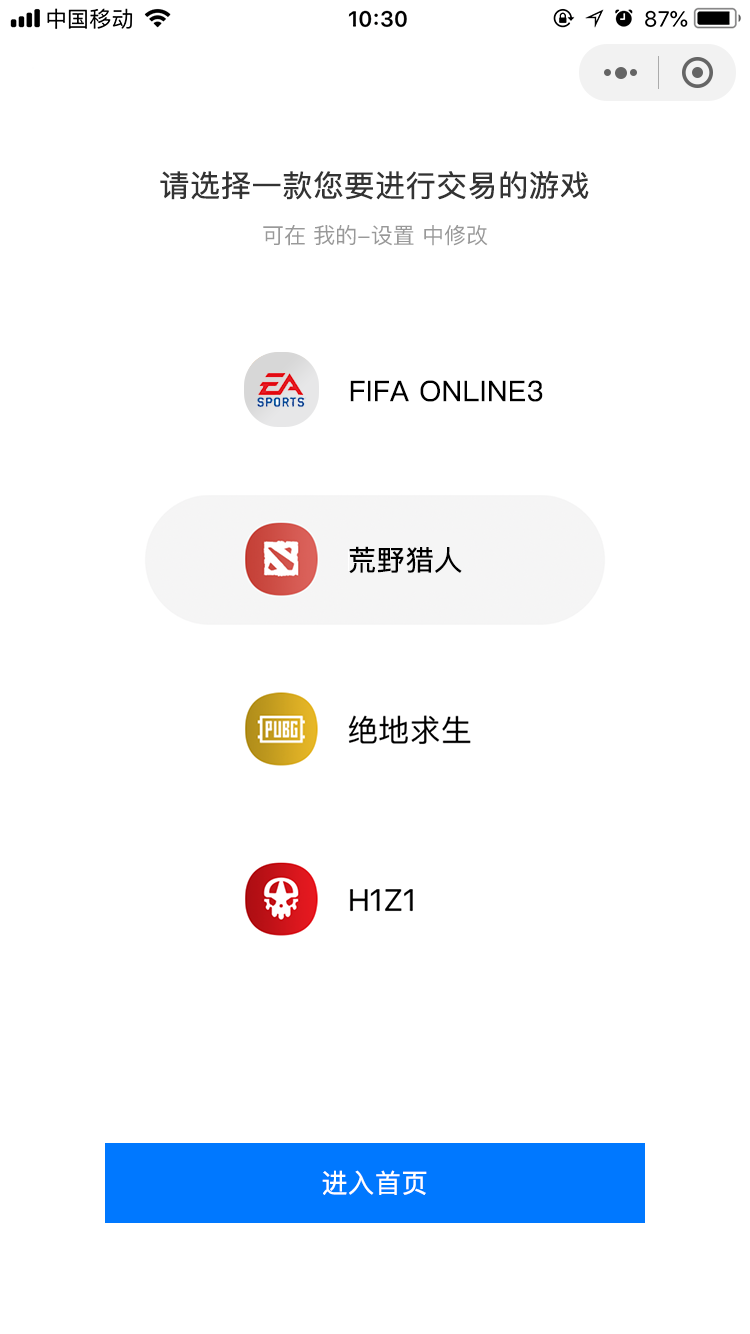
<style>
.page{position:relative;width:750px;height:1334px;background:#ffffff}
.page>*{position:absolute;margin:0}
.t1{font:30px "PingFang-SC-Medium";color:#333333;font-weight:bold}
.t2{font:22px "PingFang-SC-Medium";color:#999999}
.t3{font:28px "PingFang-SC-Medium";color:#000000;font-weight:bold}
.t4{font:26px "PingFang-SC-Medium";color:#ffffff;font-weight:bold}
</style>
<div class="page">
<p class="t1" style="left:160px;top:171px;width:429px;height:29px">请选择一款您要进行交易的游戏</p>
<p class="t2" style="left:263px;top:225px;width:225px;height:21px">可在 我的-设置 中修改</p>
<p class="t3" style="left:350px;top:380px;width:193px;height:22px">FIFA ONLINE3</p>
<p class="t3" style="left:349px;top:546px;width:113px;height:28px">荒野猎人</p>
<p class="t4" style="left:322px;top:1170px;width:105px;height:25px">进入首页</p>
</div>
